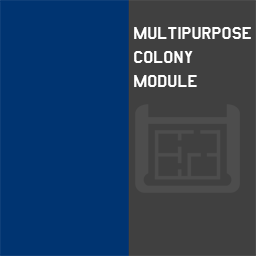
<style>
.page{position:relative;width:256px;height:256px;background:#003471}
.page>*{position:absolute;margin:0}
.t1{font:20.1px "AmarilloUSAF";color:#ffffff}
</style>
<div class="page">
<p class="t1" style="left:134px;top:27px;width:117px;height:60px">multipurpose<br>colony<br>module</p>
</div>
